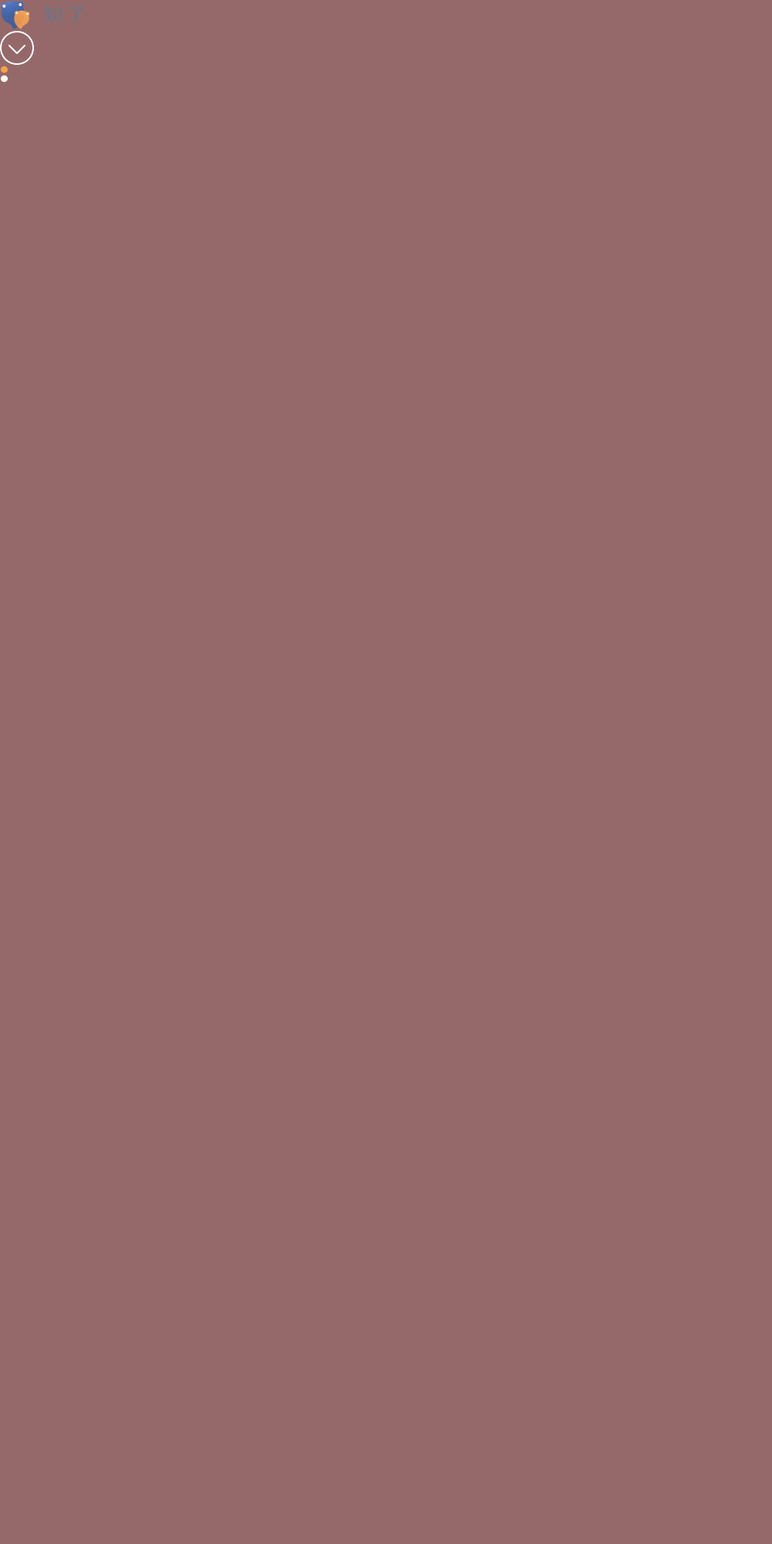
<style>
.page{position:relative;width:772px;height:1544px;background:#956969}
.page>*{position:absolute;margin:0}
.t1{font:18px "FZZZHUNHJW--GB1-0";letter-spacing:0.1em;color:#6c7485;scale:1.12 1}
</style>
<div class="page">
<p class="t1" style="left:44px;top:6px;width:40px;height:16px">知了</p>
</div>
